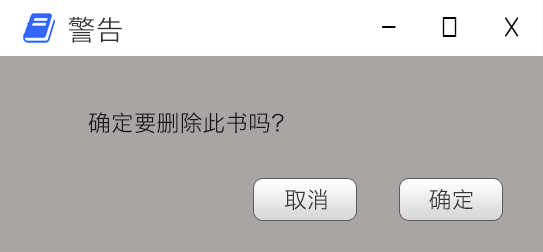
<style>
.page{position:relative;width:543px;height:252px;background:#aaa5a5}
.page>*{position:absolute;margin:0}
.t1{font:27.9px "HiraginoSansGB-W3";color:#333333}
.t2{font:22.9px "HiraginoSansGB-W3";color:#161616}
.t3{font:22.9px "HiraginoSansGB-W3";color:#373737}
</style>
<div class="page">
<p class="t1" style="left:68px;top:16px;width:54px;height:27px">警告</p>
<p class="t2" style="left:88px;top:112px;width:196px;height:22px">确定要删除此书吗？</p>
<p class="t3" style="left:285px;top:189px;width:42px;height:22px">取消</p>
<p class="t3" style="left:429px;top:189px;width:44px;height:21px">确定</p>
</div>
